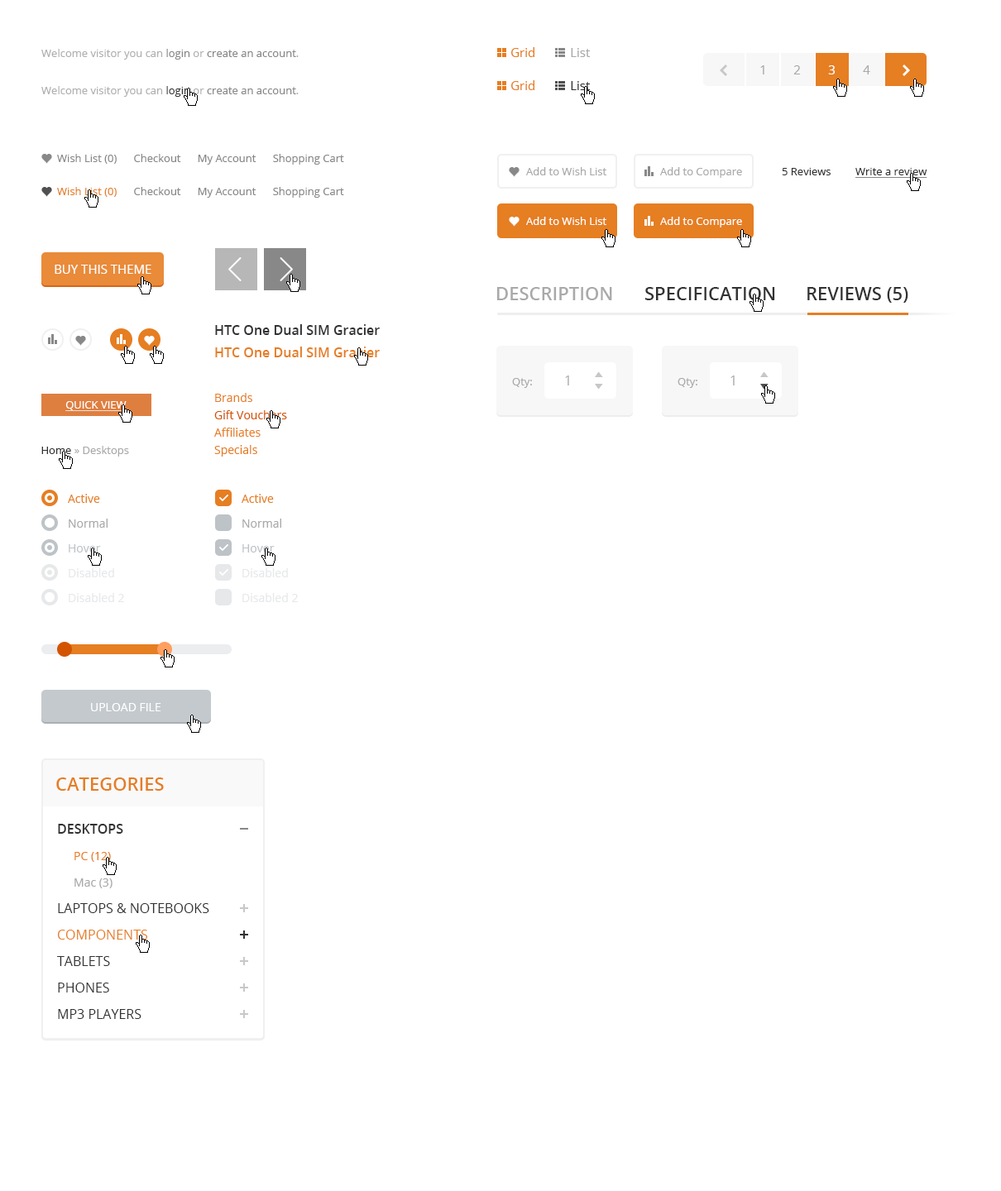
<style>
.page{position:relative;width:1001px;height:1191px;background:#ffffff}
.page>*{position:absolute;margin:0}
.t1{font:10.8px "OpenSans";color:#b0b0b0}
.t2{font:10.8px "OpenSans";color:#888888}
.t3{font:12.4px "OpenSans";color:#e67e22}
.t4{font:12.4px "OpenSans";color:#a9a9a9}
.t5{font:12.4px "OpenSans";color:#ffffff}
.t6{font:10.8px "OpenSans";color:#323232}
.t7{font:12.4px "OpenSans";color:#323232}
.t8{font:10.8px "OpenSans";color:#a9a9a9}
.t9{font:10.8px "OpenSans";color:#323232;text-decoration:underline}
.t10{font:10.8px "OpenSans";color:#e67e22}
.t11{font:10.8px "OpenSans";color:#ffffff}
.t12{font:12.4px "OpenSans";color:#ffffff;text-transform:uppercase}
.t13{font:18.2px "OpenSans-Semibold";color:#a9a9a9;text-transform:uppercase}
.t14{font:18.2px "OpenSans-Semibold";color:#323232;text-transform:uppercase}
.t15{font:13.2px "OpenSans-Semibold";color:#323232}
.t16{font:13.2px "OpenSans-Semibold";color:#e67e22}
.t17{font:13.2px "OpenSans";color:#a9a9a9}
.t18{font:10.8px "OpenSans";color:#ffffff;text-transform:uppercase;text-decoration:underline}
.t19{font:11.6px/17.4px "OpenSans";color:#e67e22}
.t20{font:11.6px/17.4px "OpenSans";color:#d35400}
.t21{font:11.6px "OpenSans";color:#e67e22}
.t22{font:11.6px "OpenSans";color:#a9a9a9}
.t23{font:11.6px "OpenSans";color:#bec4c8}
.t24{font:11.6px "OpenSans";color:#bdc3c7}
.t25{font:11.6px "OpenSans";color:#e6e8ea}
.t26{font:11.6px "OpenSans";color:#ffffff;text-transform:uppercase}
.t27{font:18.2px "OpenSans-Semibold";color:#e67e22;text-transform:uppercase}
.t28{font:11.6px/26.5px "OpenSans";color:#e67e22}
.t29{font:11.6px/26.5px "OpenSans";color:#a9a9a9}
.t30{font:13.2px/26.5px "OpenSans";color:#323232;text-transform:uppercase}
.t31{font:13.2px/26.5px "OpenSans";color:#e67e22;text-transform:uppercase}
</style>
<div class="page">
<p class="t1" style="left:41px;top:49px;width:258px;height:11px">Welcome visitor you can <span class="t2">login</span> or <span class="t2">create an account</span>.</p>
<p class="t3" style="left:511px;top:47px;width:23px;height:10px">Grid</p>
<p class="t4" style="left:571px;top:48px;width:20px;height:9px">List</p>
<p class="t4" style="left:760px;top:65px;width:4px;height:9px">1</p>
<p class="t4" style="left:793px;top:65px;width:8px;height:9px">2</p>
<p class="t5" style="left:828px;top:65px;width:7px;height:9px">3</p>
<p class="t4" style="left:863px;top:65px;width:7px;height:9px">4</p>
<p class="t1" style="left:41px;top:86px;width:258px;height:11px">Welcome visitor you can <span class="t6">login</span> or <span class="t2">create an account</span>.</p>
<p class="t3" style="left:511px;top:80px;width:23px;height:10px">Grid</p>
<p class="t7" style="left:571px;top:81px;width:20px;height:9px">List</p>
<p class="t2" style="left:57px;top:154px;width:287px;height:11px">Wish List (0)      Checkout      My Account      Shopping Cart</p>
<p class="t8" style="left:526px;top:167px;width:80px;height:8px">Add to Wish List</p>
<p class="t8" style="left:660px;top:167px;width:82px;height:11px">Add to Compare</p>
<p class="t6" style="left:782px;top:168px;width:49px;height:7px">5 Reviews</p>
<p class="t9" style="left:855px;top:168px;width:72px;height:10px">Write a review</p>
<p class="t2" style="left:57px;top:187px;width:287px;height:11px"><span class="t10">Wish List (0) </span>     Checkout      My Account      Shopping Cart</p>
<p class="t11" style="left:526px;top:217px;width:80px;height:8px">Add to Wish List</p>
<p class="t11" style="left:660px;top:217px;width:82px;height:10px">Add to Compare</p>
<p class="t12" style="left:55px;top:265px;width:96px;height:9px">BUY THIS THEME</p>
<p class="t13" style="left:497px;top:287px;width:115px;height:13px">Description</p>
<p class="t14" style="left:645px;top:287px;width:130px;height:13px">SPECIFICATION</p>
<p class="t14" style="left:807px;top:287px;width:101px;height:16px">REVIEWS (5)</p>
<p class="t15" style="left:215px;top:324px;width:165px;height:11px">HTC One Dual SIM Gracier</p>
<p class="t16" style="left:215px;top:347px;width:165px;height:10px">HTC One Dual SIM Gracier</p>
<p class="t17" style="left:565px;top:376px;width:4px;height:10px">1</p>
<p class="t17" style="left:730px;top:376px;width:5px;height:10px">1</p>
<p class="t8" style="left:512px;top:378px;width:20px;height:10px">Qty:</p>
<p class="t8" style="left:678px;top:378px;width:19px;height:10px">Qty:</p>
<p class="t18" style="left:65px;top:401px;width:62px;height:10px">quick view</p>
<p class="t19" style="left:214px;top:393px;width:73px;height:64px">Brands<br><span class="t20">Gift Vouchers<br></span>Affiliates<br>Specials</p>
<p class="t8" style="left:41px;top:446px;width:88px;height:11px"><span class="t6">Home</span> » Desktops</p>
<p class="t21" style="left:68px;top:494px;width:32px;height:9px">Active</p>
<p class="t21" style="left:242px;top:494px;width:32px;height:9px">Active</p>
<p class="t22" style="left:69px;top:519px;width:39px;height:9px">Normal</p>
<p class="t22" style="left:242px;top:519px;width:39px;height:9px">Normal</p>
<p class="t23" style="left:69px;top:544px;width:32px;height:9px">Hover</p>
<p class="t24" style="left:242px;top:544px;width:33px;height:9px">Hover</p>
<p class="t25" style="left:69px;top:568px;width:45px;height:9px">Disabled</p>
<p class="t25" style="left:242px;top:568px;width:46px;height:9px">Disabled</p>
<p class="t25" style="left:69px;top:593px;width:55px;height:9px">Disabled 2</p>
<p class="t25" style="left:242px;top:593px;width:56px;height:9px">Disabled 2</p>
<p class="t26" style="left:91px;top:703px;width:70px;height:8px">Upload File</p>
<p class="t27" style="left:56px;top:778px;width:108px;height:13px">Categories</p>
<p class="t15" style="left:58px;top:824px;width:65px;height:10px">DESKTOPS</p>
<p class="t28" style="left:74px;top:852px;width:39px;height:36px">PC (12)<br><span class="t29">Mac (3)</span></p>
<p class="t30" style="left:57px;top:903px;width:152px;height:116px">Laptops &amp; Notebooks<br><span class="t31">Components<br></span>Tablets<br>Phones<br>MP3 Players</p>
</div>
